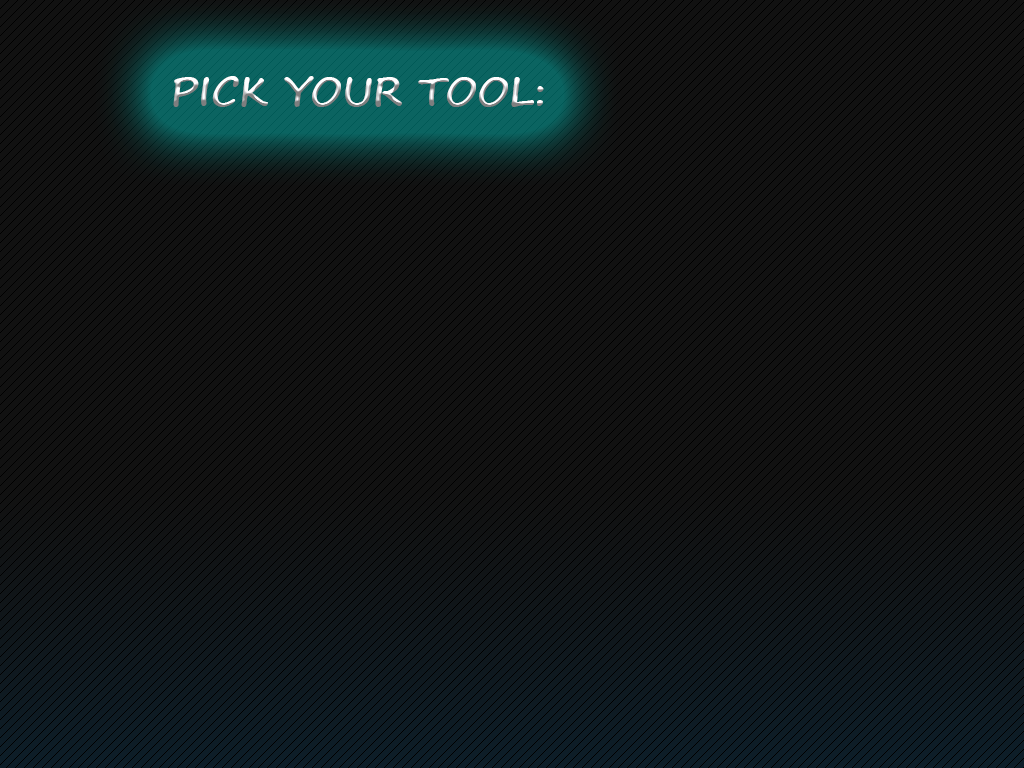
<style>
.page{position:relative;width:1024px;height:768px;background:#111111}
.page>*{position:absolute;margin:0}
.t1{font:40px "SegoePrint-Bold"}
</style>
<div class="page">
<p class="t1" style="left:173px;top:76px;width:371px;height:31px">PICK YOUR TOOL:</p>
</div>
